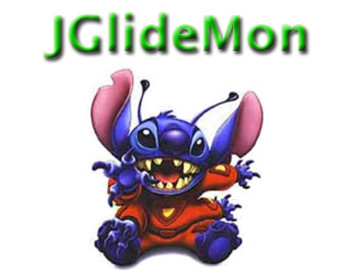
<style>
.page{position:relative;width:350px;height:280px;background:#ffffff}
.page>*{position:absolute;margin:0}
.t1{font:50.4px "LucidaSans-Demi"}
</style>
<div class="page">
<p class="t1" style="left:43px;top:12px;width:263px;height:46px">JGlideMon</p>
</div>
